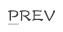
<style>
.page{position:relative;width:63px;height:32px;background:#ffffff}
.page>*{position:absolute;margin:0}
.t1{font:18px "DFLeiSho-SB-MP-RKSJ-H";color:#434343}
</style>
<div class="page">
<p class="t1" style="left:8px;top:10px;width:48px;height:11px">PREV</p>
</div>
